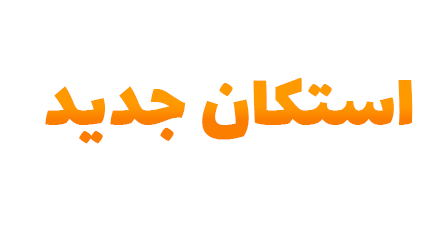
<style>
.page{position:relative;width:447px;height:236px;background:#ffffff}
.page>*{position:absolute;margin:0}
.t1{font:79.2px "Lalezar-Regular";color:#ff9900}
</style>
<div class="page">
<p class="t1" style="left:45px;top:77px;width:368px;height:67px">استکان جدید</p>
</div>
